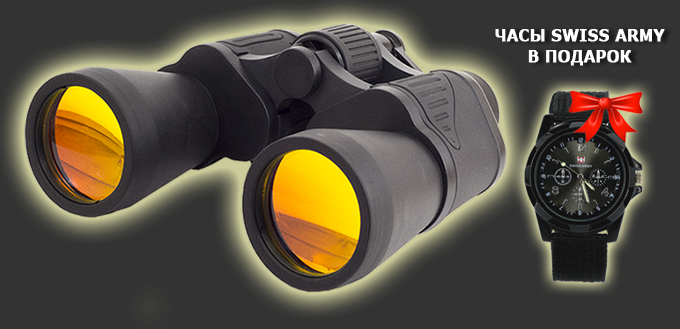
<style>
.page{position:relative;width:680px;height:329px;background:#333333}
.page>*{position:absolute;margin:0}
.t1{font:15.8px/118.5px "Verdana-Bold";letter-spacing:0.005em;color:#ffffff;font-weight:bold;scale:0.93 1}
.t2{font:15.8px/20.5px "Verdana-Bold";letter-spacing:0.005em;color:#ffffff;font-weight:bold;scale:0.93 1}
</style>
<div class="page">
<p class="t1" style="left:495px;top:29px;width:170px;height:37px;text-align:center">ЧАСЫ SWISS ARMY<br><span class="t2">В ПОДАРОК</span></p>
</div>
